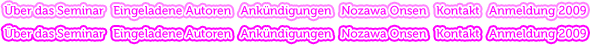
<style>
.page{position:relative;width:592px;height:46px;background:#ffffff}
.page>*{position:absolute;margin:0}
.t1{font:12px "Museo-500";color:#ff00ff}
</style>
<div class="page">
<p class="t1" style="left:4px;top:4px;width:582px;height:14px">Über das Seminar   Eingeladene Autoren   Ankündigungen   Nozawa Onsen   Kontakt   Anmeldung 2009</p>
<p class="t1" style="left:4px;top:4px;width:582px;height:14px">Über das Seminar   Eingeladene Autoren   Ankündigungen   Nozawa Onsen   Kontakt   Anmeldung 2009</p>
<p class="t1" style="left:4px;top:27px;width:582px;height:14px">Über das Seminar   Eingeladene Autoren   Ankündigungen   Nozawa Onsen   Kontakt   Anmeldung 2009</p>
<p class="t1" style="left:4px;top:27px;width:582px;height:14px">Über das Seminar   Eingeladene Autoren   Ankündigungen   Nozawa Onsen   Kontakt   Anmeldung 2009</p>
</div>
